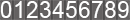
<style>
.page{position:relative;width:130px;height:20px;background:#646161}
.page>*{position:absolute;margin:0}
.t1{font:22.7px "ArialMT";color:#ffffff}
.t2{font:22.7px "ArialMT";color:#fefefe}
.t3{font:22.7px "ArialMT";color:#fffefe}
</style>
<div class="page">
<p class="t1" style="left:0px;top:1px;width:12px;height:17px">0</p>
<p class="t1" style="left:15px;top:1px;width:7px;height:17px">1</p>
<p class="t1" style="left:26px;top:1px;width:12px;height:17px">2</p>
<p class="t1" style="left:40px;top:1px;width:11px;height:17px">3</p>
<p class="t1" style="left:52px;top:1px;width:12px;height:17px">4</p>
<p class="t1" style="left:66px;top:1px;width:11px;height:17px">5</p>
<p class="t1" style="left:79px;top:1px;width:11px;height:17px">6</p>
<p class="t2" style="left:92px;top:1px;width:11px;height:17px">7</p>
<p class="t3" style="left:105px;top:1px;width:11px;height:17px">8</p>
<p class="t1" style="left:118px;top:1px;width:11px;height:17px">9</p>
</div>
